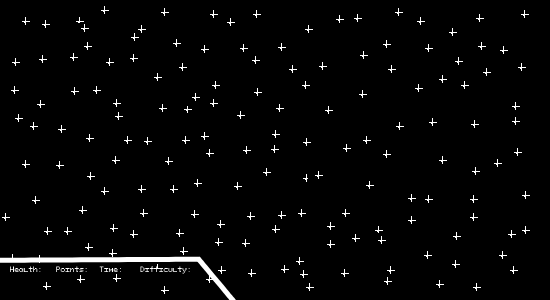
<style>
.page{position:relative;width:550px;height:300px;background:#000000}
.page>*{position:absolute;margin:0}
.t1{font:7px "PixeloidMono";color:#ffffff}
</style>
<div class="page">
<p class="t1" style="left:10px;top:266px;width:31px;height:6px">Health:</p>
<p class="t1" style="left:56px;top:266px;width:31px;height:6px">Points:</p>
<p class="t1" style="left:99px;top:266px;width:22px;height:6px">Time:</p>
<p class="t1" style="left:140px;top:266px;width:50px;height:8px">Difficulty:</p>
</div>
